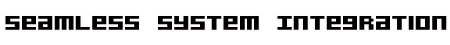
<style>
.page{position:relative;width:450px;height:45px;background:#ffffff}
.page>*{position:absolute;margin:0}
.t1{font:36.2px "AcknowledgeTT-BRK-";color:#010101;scale:0.86 1}
</style>
<div class="page">
<p class="t1" style="left:5px;top:16px;width:442px;height:14px">Seamless System Integration</p>
</div>
